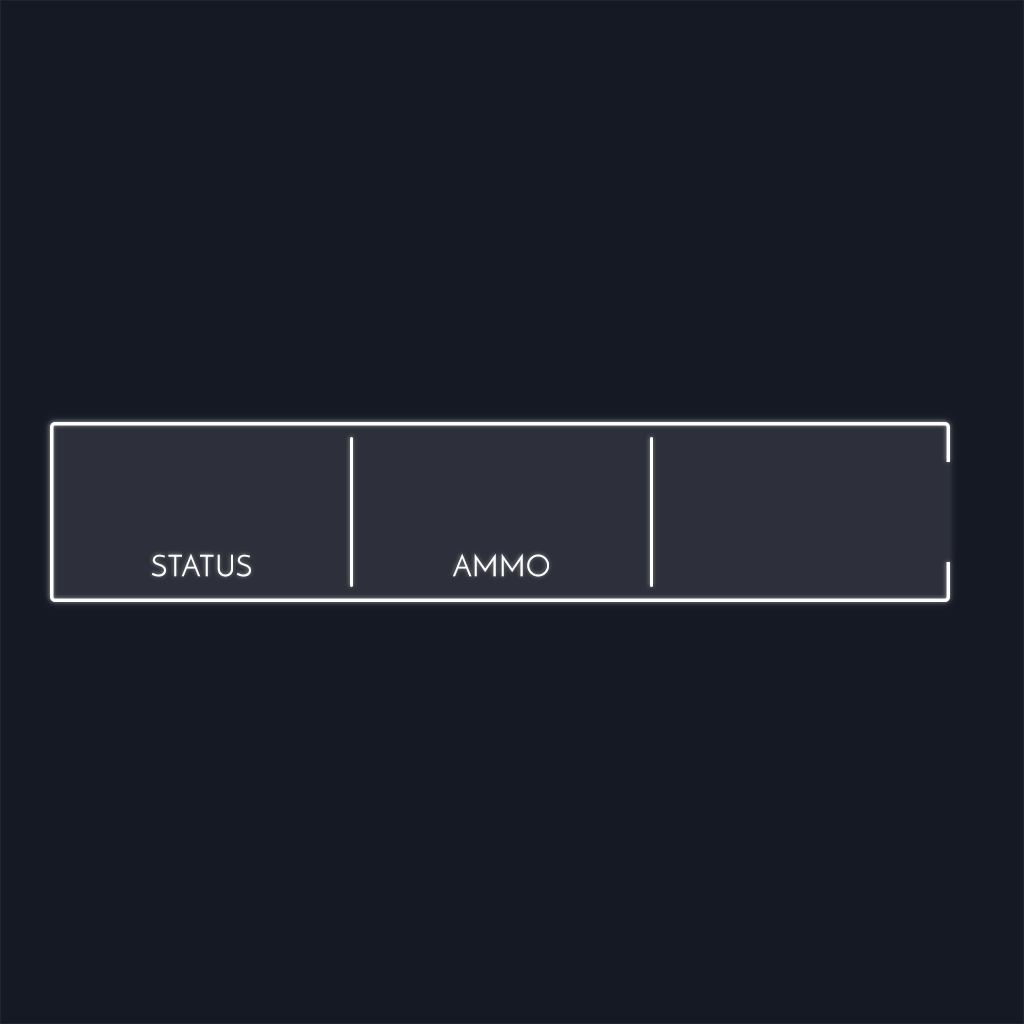
<style>
.page{position:relative;width:1024px;height:1024px;background:#151924}
.page>*{position:absolute;margin:0}
.t1{font:30px "JosefinSans";color:#ffffff}
</style>
<div class="page">
<p class="t1" style="left:151px;top:553px;width:100px;height:24px">STATUS</p>
<p class="t1" style="left:453px;top:553px;width:96px;height:24px">AMMO</p>
</div>
